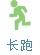
<style>
.page{position:relative;width:40px;height:55px;background:#ffffff}
.page>*{position:absolute;margin:0}
.t1{font:22.7px "SimSun";letter-spacing:0.075em;color:#4788b2;font-variant:small-caps}
</style>
<div class="page">
<p class="t1" style="left:7px;top:39px;width:25px;height:12px">长跑</p>
</div>
